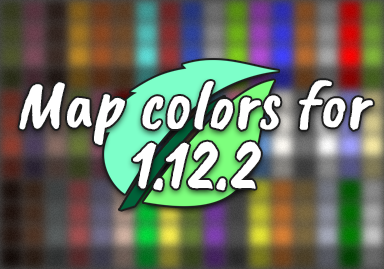
<style>
.page{position:relative;width:384px;height:269px}
.page>*{position:absolute;margin:0}
.t1{font:70px/61px "CaveatBrush-Regular";color:#ffffff;font-style:italic}
</style>
<div class="page">
<p class="t1" style="left:19px;top:80px;width:354px;height:111px;text-align:center">Map colors for<br>1.12.2</p>
</div>
